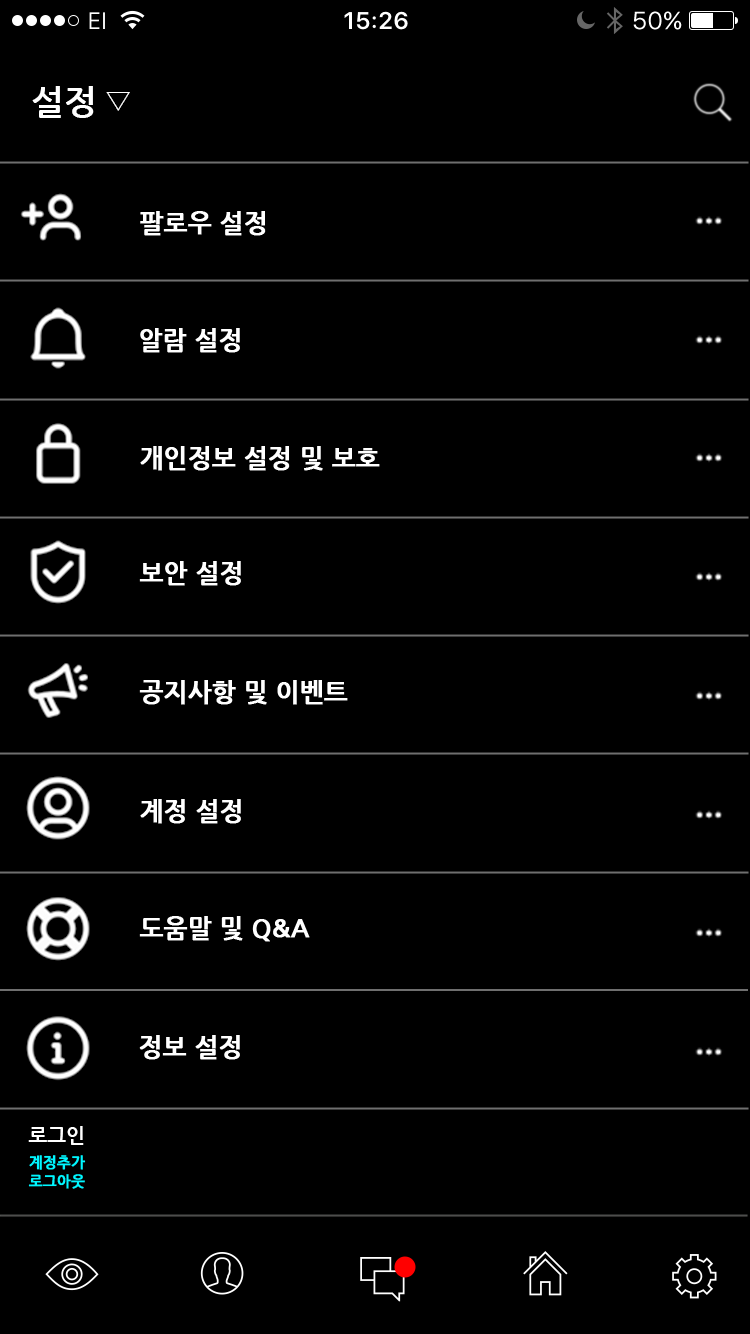
<style>
.page{position:relative;width:750px;height:1334px;background:#000000}
.page>*{position:absolute;margin:0}
.t1{font:35px "NanumGothicBold";color:#ffffff}
.t2{font:30px "Gulim";color:#ffffff}
.t3{font:25px "NanumGothicBold";color:#ffffff;font-weight:bold}
.t4{font:20px "NanumGothicBold";color:#ffffff}
.t5{font:15px "NanumGothicBold";color:#00f6ff;font-weight:bold}
</style>
<div class="page">
<p class="t1" style="left:32px;top:86px;width:62px;height:32px">설정</p>
<p class="t2" style="left:106px;top:92px;width:24px;height:19px">▽</p>
<p class="t3" style="left:140px;top:211px;width:126px;height:25px">팔로우 설정</p>
<p class="t3" style="left:140px;top:328px;width:100px;height:25px">알람 설정</p>
<p class="t3" style="left:140px;top:446px;width:240px;height:25px">개인정보 설정 및 보호</p>
<p class="t3" style="left:139px;top:561px;width:102px;height:25px">보안 설정</p>
<p class="t3" style="left:139px;top:680px;width:209px;height:25px">공지사항 및 이벤트</p>
<p class="t3" style="left:140px;top:799px;width:101px;height:25px">계정 설정</p>
<p class="t3" style="left:139px;top:916px;width:171px;height:26px">도움말 및 Q&amp;A</p>
<p class="t3" style="left:139px;top:1035px;width:101px;height:25px">정보 설정</p>
<p class="t4" style="left:28px;top:1126px;width:56px;height:19px">로그인</p>
<p class="t5" style="left:29px;top:1155px;width:57px;height:15px">계정추가</p>
<p class="t5" style="left:28px;top:1174px;width:57px;height:15px">로그아웃</p>
</div>
